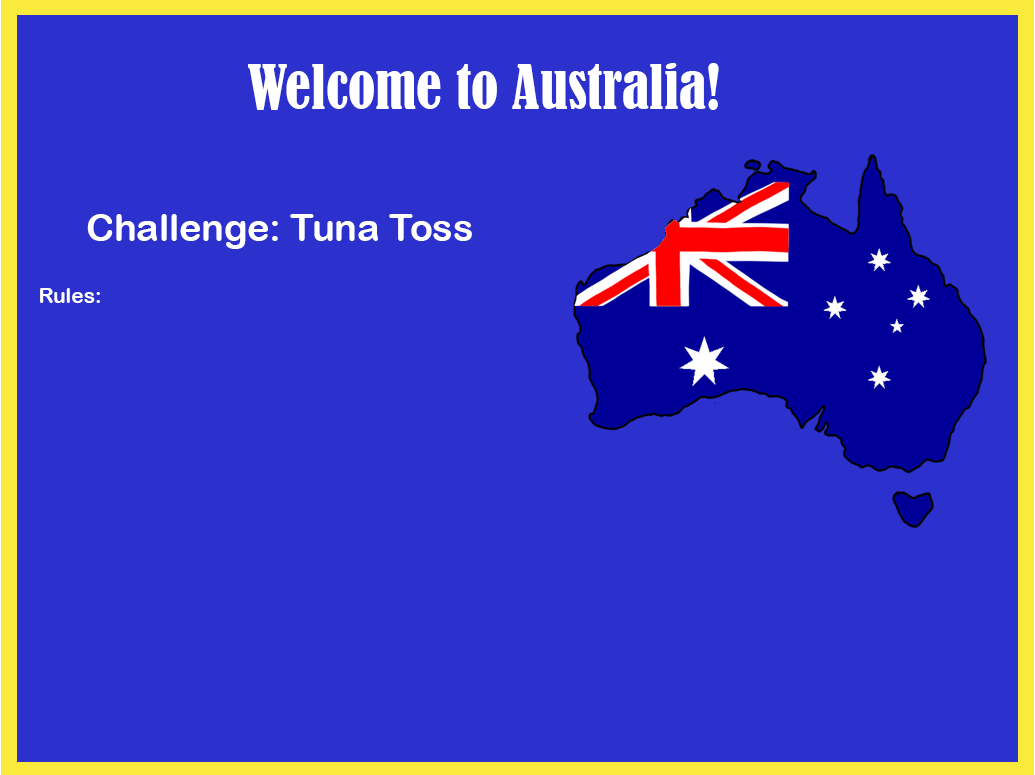
<style>
.page{position:relative;width:1035px;height:775px;background:#2c30cd}
.page>*{position:absolute;margin:0}
.t1{font:56.9px "BernardMT-Condensed";color:#ffffff}
.t2{font:37.5px "ArialRoundedMTBold";color:#ffffff}
.t3{font:20.9px "ArialRoundedMTBold";color:#ffffff}
</style>
<div class="page">
<p class="t1" style="left:248px;top:63px;width:471px;height:47px">Welcome to Australia!</p>
<p class="t2" style="left:87px;top:214px;width:385px;height:35px">Challenge: Tuna Toss</p>
<p class="t3" style="left:40px;top:288px;width:60px;height:15px">Rules:</p>
</div>
